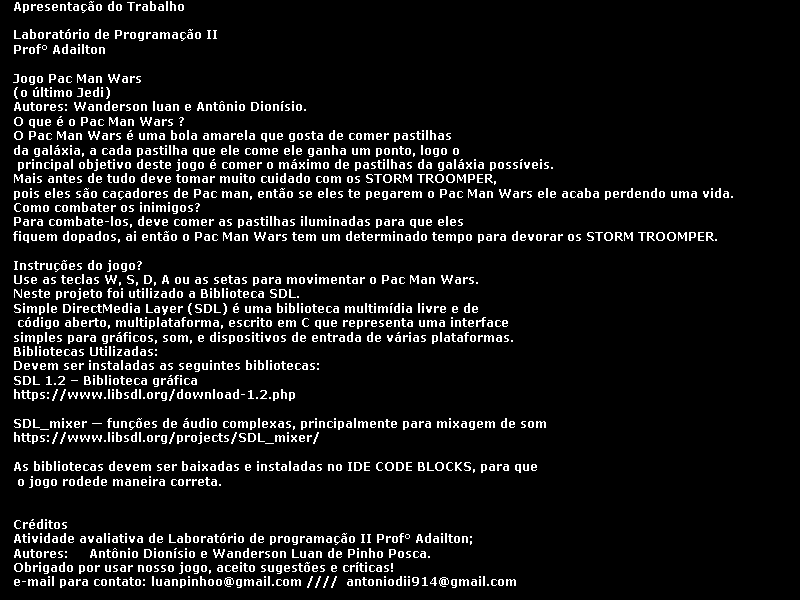
<style>
.page{position:relative;width:800px;height:600px;background:#000000}
.page>*{position:absolute;margin:0}
.t1{font:12px "Verdana-Bold";color:#ffffff}
</style>
<div class="page">
<p class="t1" style="left:13px;top:1px;width:720px;height:587px">Apresentação do Trabalho<br><br>Laboratório de Programação II<br>Prof° Adailton<br><br>Jogo Pac Man Wars <br>(o último Jedi)<br>Autores: Wanderson luan e Antônio Dionísio.<br>O que é o Pac Man Wars ?<br>O Pac Man Wars é uma bola amarela que gosta de comer pastilhas <br>da galáxia, a cada pastilha que ele come ele ganha um ponto, logo o<br> principal objetivo deste jogo é comer o máximo de pastilhas da galáxia possíveis.<br>Mais antes de tudo deve tomar muito cuidado com os STORM TROOMPER, <br>pois eles são caçadores de Pac man, então se eles te pegarem o Pac Man Wars ele acaba perdendo uma vida.<br>Como combater os inimigos?<br>Para combate-los, deve comer as pastilhas iluminadas para que eles <br>fiquem dopados, ai então o Pac Man Wars tem um determinado tempo para devorar os STORM TROOMPER.<br><br>Instruções do jogo?<br>Use as teclas W, S, D, A ou as setas para movimentar o Pac Man Wars.<br>Neste projeto foi utilizado a Biblioteca SDL.<br>Simple DirectMedia Layer (SDL) é uma biblioteca multimídia livre e de<br> código aberto, multiplataforma, escrito em C que representa uma interface <br>simples para gráficos, som, e dispositivos de entrada de várias plataformas.<br>Bibliotecas Utilizadas:<br>Devem ser instaladas as seguintes bibliotecas: <br>SDL 1.2 – Biblioteca gráfica<br>https://www.libsdl.org/download-1.2.php<br><br>SDL_mixer — funções de áudio complexas, principalmente para mixagem de som<br>https://www.libsdl.org/projects/SDL_mixer/<br><br>As bibliotecas devem ser baixadas e instaladas no IDE CODE BLOCKS, para que<br> o jogo rodede maneira correta.<br><br><br>Créditos<br>Atividade avaliativa de Laboratório de programação II Prof° Adailton;<br>Autores:     Antônio Dionísio e Wanderson Luan de Pinho Posca.<br>Obrigado por usar nosso jogo, aceito sugestões e críticas!<br>e-mail para contato: luanpinhoo@gmail.com ////  antoniodii914@gmail.com</p>
</div>
